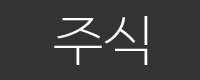
<style>
.page{position:relative;width:200px;height:80px;background:#333333}
.page>*{position:absolute;margin:0}
.t1{font:54px "KoreanNGD-L";color:#ffffff}
</style>
<div class="page">
<p class="t1" style="left:54px;top:16px;width:94px;height:49px">주식</p>
</div>
